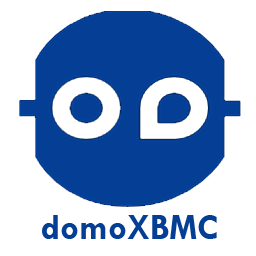
<style>
.page{position:relative;width:256px;height:256px;background:#ffffff}
.page>*{position:absolute;margin:0}
.t1{font:36px "TwCenMT-Bold";color:#053f95}
</style>
<div class="page">
<p class="t1" style="left:42px;top:215px;width:175px;height:24px">domoXBMC</p>
</div>
